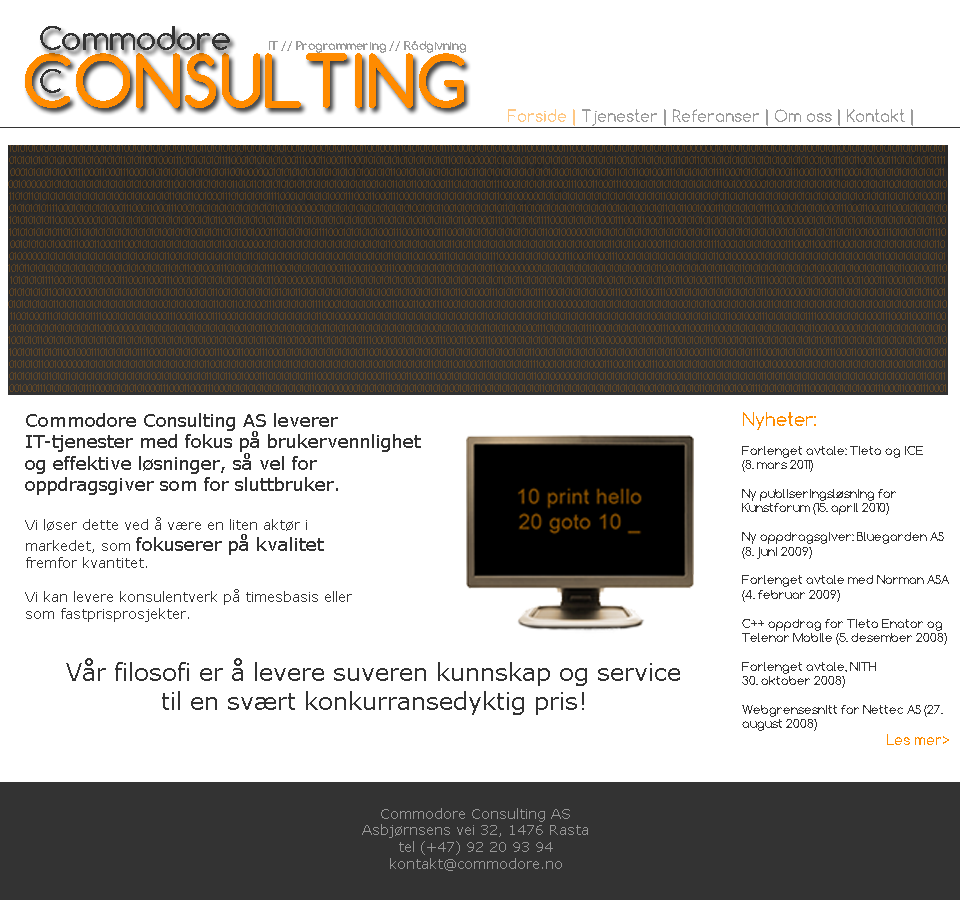
<style>
.page{position:relative;width:960px;height:900px;background:#ffffff}
.page>*{position:absolute;margin:0}
.t1{font:16px "Comfortaa";color:#9b9b9b}
.t2{font:18px "Verdana";color:#333333}
.t3{font:14px "Verdana";color:#333333}
.t4{font:24px "Verdana";color:#333333}
.t5{font:12px "Comfortaa";color:#333333}
.t6{font:18px "Comfortaa";color:#ff8c00}
.t7{font:14px "Comfortaa";color:#ff8c00}
.t8{font:14px "Verdana";color:#979797}
</style>
<div class="page">
<p class="t1" style="left:508px;top:109px;width:405px;height:17px">Forside | Tjenester | Referanser | Om oss | Kontakt |</p>
<p class="t2" style="left:25px;top:413px;width:655px;height:302px">Commodore Consulting AS leverer <br>IT-tjenester med fokus på brukervennlighet <br>og effektive løsninger, så vel for <br>oppdragsgiver som for sluttbruker.<br><br><span class="t3">Vi løser dette ved å være en liten aktør i <br>markedet, som </span>fokuserer på kvalitet<span class="t3"> <br>fremfor kvantitet.<br><br>Vi kan levere konsulentverk på timesbasis eller <br>som fastprisprosjekter.<br><br><br></span><span class="t4">Vår filosofi er å levere suveren kunnskap og service <br>til en svært konkurransedyktig pris!</span></p>
<p class="t5" style="left:742px;top:412px;width:207px;height:333px"><span class="t6">Nyheter:<br></span><br>Forlenget avtale: Tieto og ICE <br>(8. mars 2011)<br><br>Ny publiseringsløsning for <br>Kunstforum (15. april 2010)<br><br>Ny oppdragsgiver: Bluegarden AS (8. juni 2009)<br><br>Forlenget avtale med Norman ASA (4. februar 2009)<br><br>C++ oppdrag for Tieto Enator og Telenor Mobile (5. desember 2008)<br><br>Forlenget avtale, NITH <br>30. oktober 2008)<br><br>Webgrensesnitt for Nettec AS (27. august 2008)<br>    <span class="t7">Les mer&gt;</span></p>
<p class="t8" style="left:362px;top:808px;width:226px;height:63px;text-align:center">Commodore Consulting AS<br>Asbjørnsens vei 32, 1476 Rasta<br>tel (+47) 92 20 93 94<br>kontakt@commodore.no</p>
</div>
